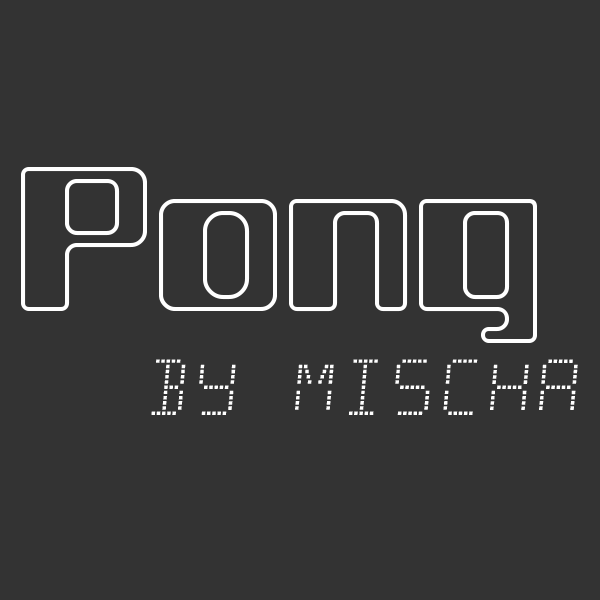
<style>
.page{position:relative;width:600px;height:600px;background:#333333}
.page>*{position:absolute;margin:0}
.t1{font:200px "WhiteWolf";color:#ffffff}
.t2{font:72px "Minisystem-Regular";color:#ffffff}
</style>
<div class="page">
<p class="t1" style="left:21px;top:167px;width:516px;height:176px">Pong</p>
<p class="t2" style="left:151px;top:359px;width:427px;height:56px">By Mischa</p>
</div>
